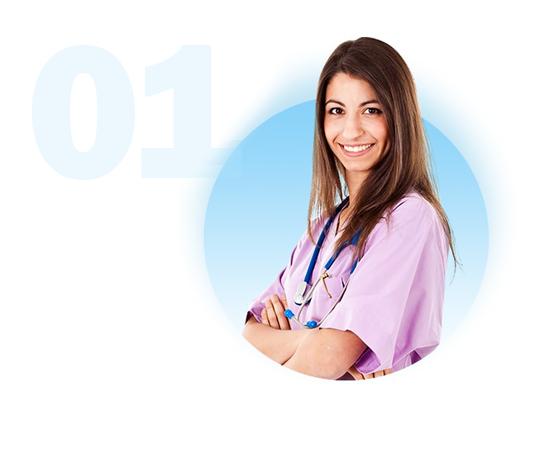
<style>
.page{position:relative;width:543px;height:454px;background:#ffffff}
.page>*{position:absolute;margin:0}
.t1{font:195.6px "FranklinGothic-Heavy";letter-spacing:-0.04em;color:#edf8fe;text-transform:uppercase}
</style>
<div class="page">
<p class="t1" style="left:31px;top:44px;width:211px;height:136px">01</p>
</div>
